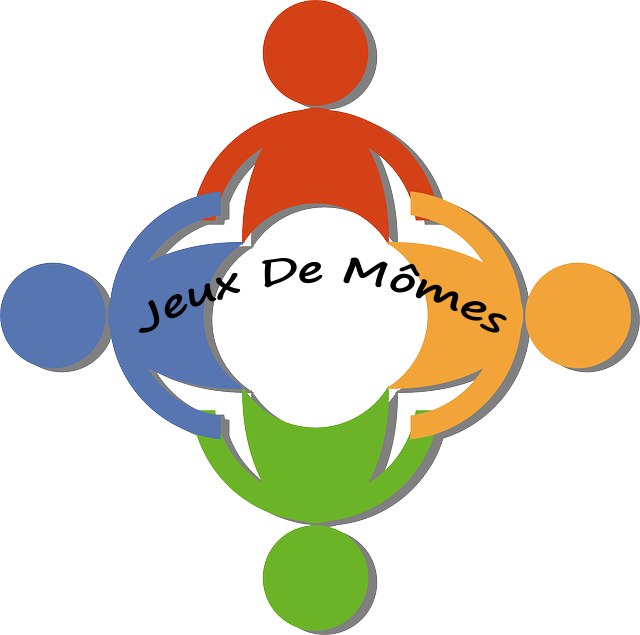
<style>
.page{position:relative;width:640px;height:635px;background:#ffffff}
.page>*{position:absolute;margin:0}
.t1{font:36px "SegoePrint-Bold";color:#000000}
</style>
<div class="page">
<p class="t1" style="left:138px;top:257px;width:369px;height:76px;text-align:center">Jeux De Mômes</p>
</div>
